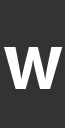
<style>
.page{position:relative;width:65px;height:128px;background:#333333}
.page>*{position:absolute;margin:0}
.t1{font:75px "AdobeGothicStd-Bold";color:#ffffff}
</style>
<div class="page">
<p class="t1" style="left:4px;top:47px;width:59px;height:42px">w</p>
</div>
